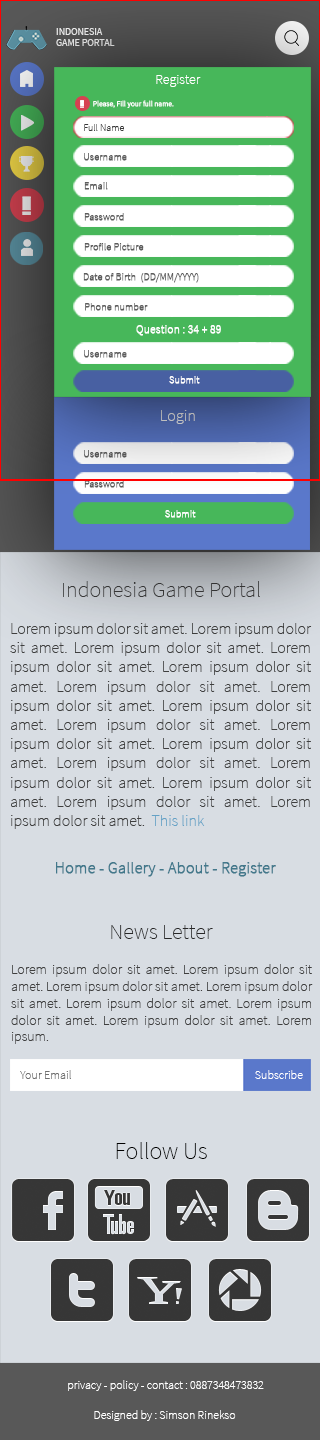
<style>
.page{position:relative;width:320px;height:1440px;background:#d8dde3}
.page>*{position:absolute;margin:0}
.t1{font:9.8px "SourceSansPro-Regular";color:#e0e0e0}
.t2{font:14.1px "SourceSansPro-ExtraLight";color:#ffffff}
.t3{font:7.4px "SourceSansPro-ExtraLight";color:#ffffff;font-weight:bold}
.t4{font:10px "SourceSansPro-ExtraLight";color:#383838}
.t5{font:10px "SourceSansPro-ExtraLight";color:#5d5d5d;font-weight:bold}
.t6{font:11.5px "SourceSansPro-ExtraLight";color:#ffffff;font-weight:bold}
.t7{font:10px "SourceSansPro-ExtraLight";color:#ffffff;font-weight:bold}
.t8{font:16.5px "SourceSansPro-ExtraLight";color:#bdbdbd}
.t9{font:22px "SourceSansPro-ExtraLight";color:#3f3f3f}
.t10{font:16px "SourceSansPro-ExtraLight";color:#3f3f3f}
.t11{font:16px "SourceSansPro-ExtraLight";color:#65a2c6}
.t12{font:16px "SourceSansPro-ExtraLight";color:#42788b;font-weight:bold}
.t13{font:22px "SourceSansPro-ExtraLight";color:#282828}
.t14{font:14px "SourceSansPro-ExtraLight";color:#3f3f3f}
.t15{font:12.1px "SourceSansPro-ExtraLight";color:#6f6f6f}
.t16{font:12.1px "SourceSansPro-ExtraLight";color:#ffffff}
.t17{font:24px "SourceSansPro-ExtraLight";color:#000000}
.t18{font:12px "SourceSansPro-ExtraLight";color:#ffffff}
</style>
<div class="page">
<p class="t1" style="left:56px;top:28px;width:59px;height:18px">INDONESIA<br>GAME PORTAL</p>
<p class="t2" style="left:156px;top:75px;width:45px;height:12px">Register</p>
<p class="t3" style="left:93px;top:100px;width:81px;height:8px">Please, Fill your full name.</p>
<p class="t4" style="left:84px;top:124px;width:40px;height:7px">Full Name</p>
<p class="t5" style="left:84px;top:153px;width:43px;height:8px">Username</p>
<p class="t5" style="left:84px;top:182px;width:24px;height:8px">Email</p>
<p class="t5" style="left:84px;top:213px;width:40px;height:8px">Password</p>
<p class="t5" style="left:84px;top:243px;width:60px;height:8px">Profile Picture</p>
<p class="t5" style="left:83px;top:273px;width:116px;height:10px">Date of Birth  (DD/MM/YYYY)</p>
<p class="t5" style="left:85px;top:303px;width:63px;height:8px">Phone number</p>
<p class="t6" style="left:136px;top:325px;width:85px;height:11px">Question : 34 + 89</p>
<p class="t5" style="left:84px;top:350px;width:43px;height:8px">Username</p>
<p class="t7" style="left:169px;top:376px;width:31px;height:8px">Submit</p>
<p class="t8" style="left:161px;top:410px;width:34px;height:14px">Login</p>
<p class="t5" style="left:84px;top:450px;width:43px;height:8px">Username</p>
<p class="t5" style="left:84px;top:480px;width:40px;height:8px">Password</p>
<p class="t7" style="left:165px;top:510px;width:31px;height:8px">Submit</p>
<p class="t9" style="left:63px;top:581px;width:197px;height:16px">Indonesia Game Portal</p>
<p class="t10" style="left:10px;top:623px;width:302px;height:206px;text-align:justify">Lorem ipsum dolor sit amet. Lorem ipsum dolor sit amet. Lorem ipsum dolor sit amet. Lorem ipsum dolor sit amet. Lorem ipsum dolor sit amet. Lorem ipsum dolor sit amet. Lorem ipsum dolor sit amet. Lorem ipsum dolor sit amet. Lorem ipsum dolor sit amet. Lorem ipsum dolor sit amet. Lorem ipsum dolor sit amet. Lorem ipsum dolor sit amet. Lorem ipsum dolor sit amet. Lorem ipsum dolor sit amet. Lorem ipsum dolor sit amet. Lorem ipsum dolor sit amet.  <span class="t11">This link</span></p>
<p class="t12" style="left:56px;top:862px;width:220px;height:15px">Home - Gallery - About - Register</p>
<p class="t13" style="left:111px;top:925px;width:102px;height:14px">News Letter</p>
<p class="t14" style="left:11px;top:964px;width:302px;height:80px;text-align:justify">Lorem ipsum dolor sit amet. Lorem ipsum dolor sit amet. Lorem ipsum dolor sit amet. Lorem ipsum dolor sit amet. Lorem ipsum dolor sit amet. Lorem ipsum dolor sit amet. Lorem ipsum dolor sit amet. Lorem ipsum.</p>
<p class="t15" style="left:20px;top:1070px;width:51px;height:9px">Your Email</p>
<p class="t16" style="left:255px;top:1070px;width:48px;height:9px">Subscribe</p>
<p class="t17" style="left:116px;top:1142px;width:91px;height:17px">Follow Us</p>
<p class="t18" style="left:68px;top:1380px;width:196px;height:11px">privacy - policy - contact : 0887348473832</p>
<p class="t16" style="left:94px;top:1410px;width:142px;height:11px">Designed by : Simson Rinekso</p>
</div>
